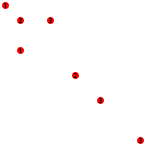
<style>
.page{position:relative;width:150px;height:150px;background:#ffffff}
.page>*{position:absolute;margin:0}
.t1{font:7px "MyriadPro-Regular";color:#000000}
</style>
<div class="page">
<p class="t1" style="left:4px;top:3px;width:2px;height:5px">1</p>
<p class="t1" style="left:18px;top:18px;width:4px;height:5px">2</p>
<p class="t1" style="left:48px;top:18px;width:4px;height:5px">3</p>
<p class="t1" style="left:19px;top:48px;width:2px;height:5px">1</p>
<p class="t1" style="left:73px;top:73px;width:4px;height:5px">2</p>
<p class="t1" style="left:98px;top:98px;width:4px;height:5px">3</p>
<p class="t1" style="left:138px;top:138px;width:4px;height:5px">3</p>
</div>
